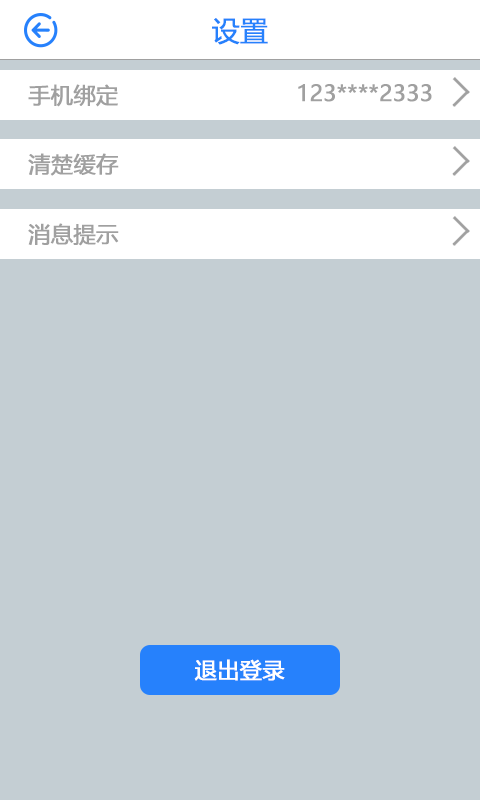
<style>
.page{position:relative;width:480px;height:800px;background:#c4ced3}
.page>*{position:absolute;margin:0}
.t1{font:28px "MicrosoftYaHei";color:#2681fc;font-weight:bold}
.t2{font:22px "MicrosoftYaHei";color:#a0a0a0;font-weight:bold}
.t3{font:22px "MicrosoftYaHei";color:#fefefe;font-weight:bold}
</style>
<div class="page">
<p class="t1" style="left:212px;top:18px;width:56px;height:27px">设置</p>
<p class="t2" style="left:28px;top:84px;width:90px;height:23px">手机绑定</p>
<p class="t2" style="left:298px;top:84px;width:134px;height:18px">123****2333</p>
<p class="t2" style="left:28px;top:153px;width:91px;height:23px">清楚缓存</p>
<p class="t2" style="left:28px;top:223px;width:91px;height:23px">消息提示</p>
<p class="t3" style="left:194px;top:659px;width:91px;height:22px">退出登录</p>
</div>
